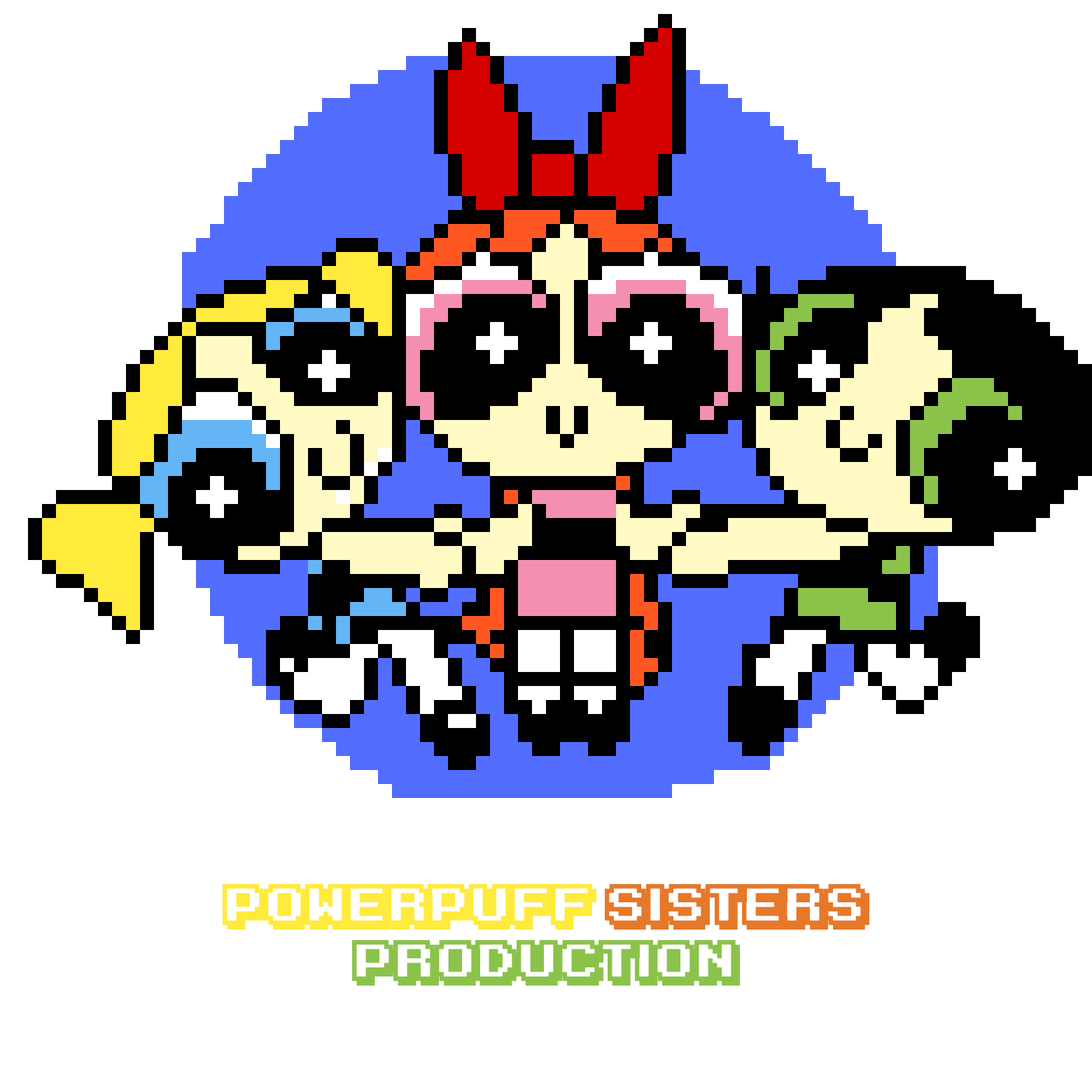
<style>
.page{position:relative;width:1092px;height:1092px;background:#ffffff}
.page>*{position:absolute;margin:0}
.t1{font:46.7px "KarmaticArcade";color:#8bc34a}
.t2{font:46.7px "KarmaticArcade";color:#ffeb3b}
.t3{font:46.7px "KarmaticArcade";color:#e67929}
</style>
<div class="page">
<p class="t1" style="left:223px;top:884px;width:646px;height:102px;text-align:center"><span class="t2">Powerpuff </span><span class="t3">Sisters<br></span>Production</p>
</div>
